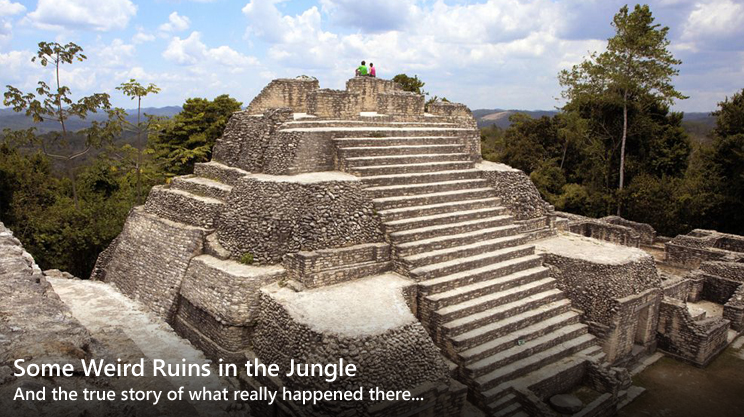
<style>
.page{position:relative;width:744px;height:417px}
.page>*{position:absolute;margin:0}
.t1{font:23.9px "SegoeUI-SemiBold";color:#ffffff}
.t2{font:17.9px "SegoeUI-SemiBold";color:#ffffff}
</style>
<div class="page">
<p class="t1" style="left:14px;top:358px;width:343px;height:24px">Some Weird Ruins in the Jungle</p>
<p class="t2" style="left:13px;top:386px;width:411px;height:19px">And the true story of what really happened there...</p>
</div>
